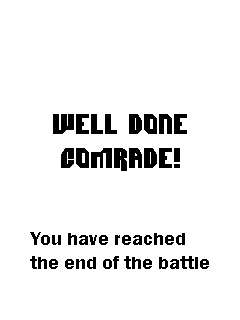
<style>
.page{position:relative;width:240px;height:320px;background:#ffffff}
.page>*{position:absolute;margin:0}
.t1{font:28px "Dimitri";color:#000000}
.t2{font:20px "FranklinGothic-Demi";color:#000000}
</style>
<div class="page">
<p class="t1" style="left:53px;top:114px;width:134px;height:57px;text-align:center">Well done<br>Comrade!</p>
<p class="t2" style="left:30px;top:232px;width:179px;height:37px">You have reached <br>the end of the battle</p>
</div>
